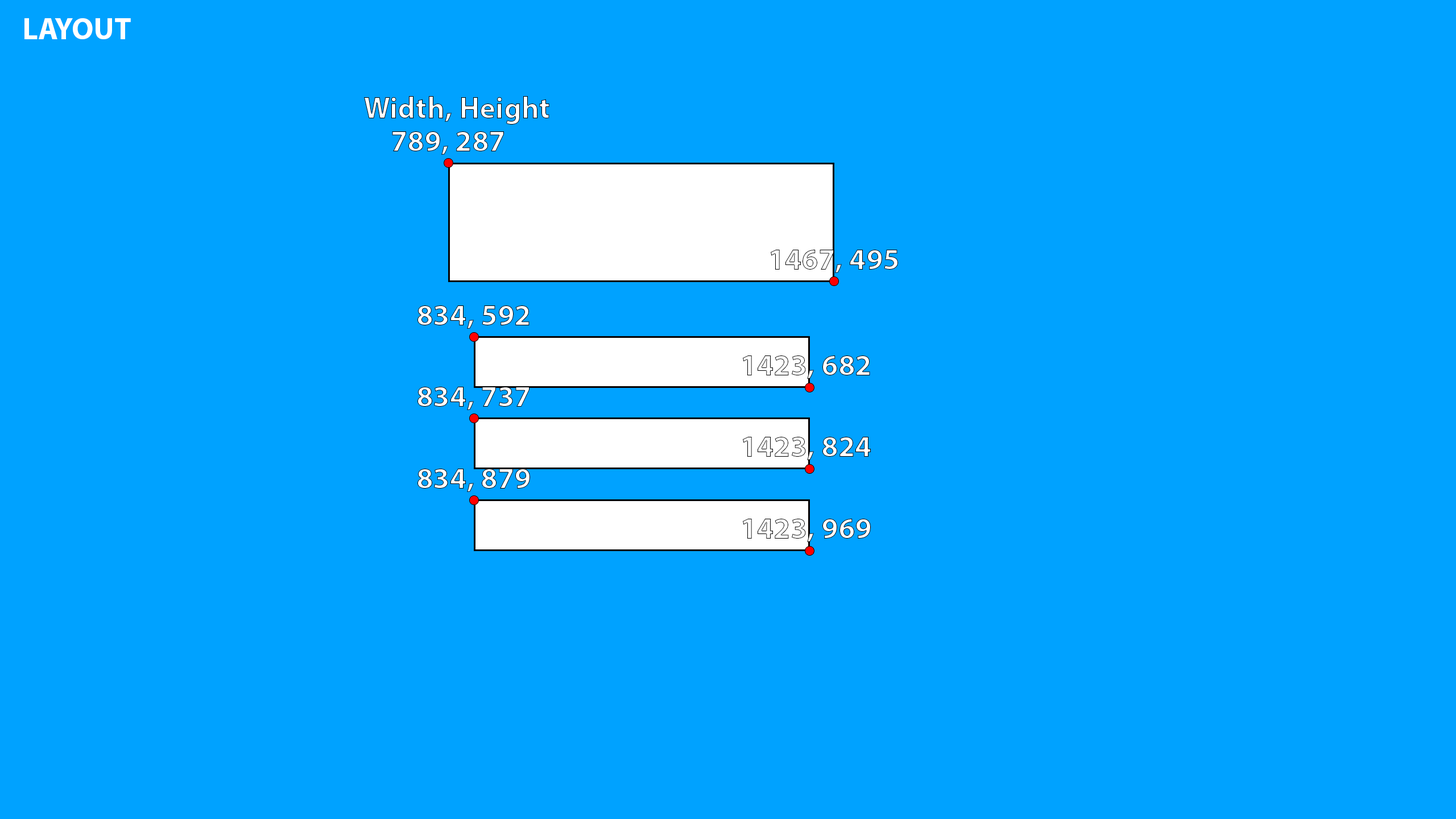
<style>
.page{position:relative;width:1456px;height:819px;background:#00a2ff}
.page>*{position:absolute;margin:0}
.t1{font:30.3px "MyriadPro-Bold";color:#ffffff}
</style>
<div class="page">
<p class="t1" style="left:24px;top:18px;width:107px;height:21px">LAYOUT</p>
<p class="t1" style="left:364px;top:96px;width:185px;height:29px">Width, Height</p>
<p class="t1" style="left:392px;top:131px;width:112px;height:24px">789, 287</p>
<p class="t1" style="left:771px;top:250px;width:127px;height:23px">1467, 495</p>
<p class="t1" style="left:417px;top:305px;width:112px;height:24px">834, 592</p>
<p class="t1" style="left:743px;top:355px;width:127px;height:24px">1423, 682</p>
<p class="t1" style="left:417px;top:387px;width:112px;height:23px">834, 737</p>
<p class="t1" style="left:743px;top:437px;width:128px;height:23px">1423, 824</p>
<p class="t1" style="left:417px;top:469px;width:113px;height:23px">834, 879</p>
<p class="t1" style="left:743px;top:519px;width:128px;height:23px">1423, 969</p>
</div>
